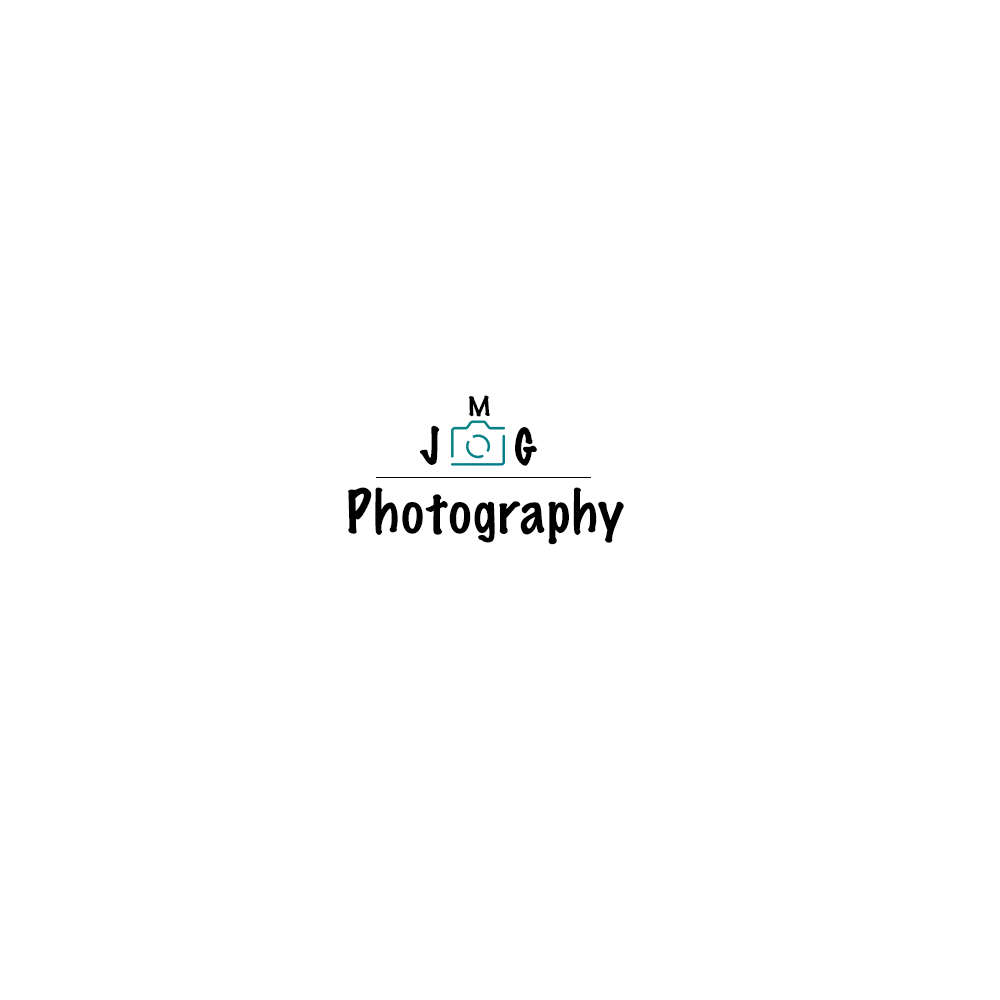
<style>
.page{position:relative;width:1000px;height:1000px;background:#ffffff}
.page>*{position:absolute;margin:0}
.t1{font:24.2px "MarkerFelt-Thin";color:#000000}
.t2{font:46.3px "MarkerFelt-Thin";color:#000000}
.t3{font:54px "MarkerFelt-Thin";color:#000000}
</style>
<div class="page">
<p class="t1" style="left:469px;top:395px;width:21px;height:22px">M</p>
<p class="t2" style="left:420px;top:425px;width:20px;height:40px">J</p>
<p class="t2" style="left:515px;top:427px;width:22px;height:39px">G</p>
<p class="t3" style="left:348px;top:487px;width:276px;height:58px">Photography</p>
</div>
